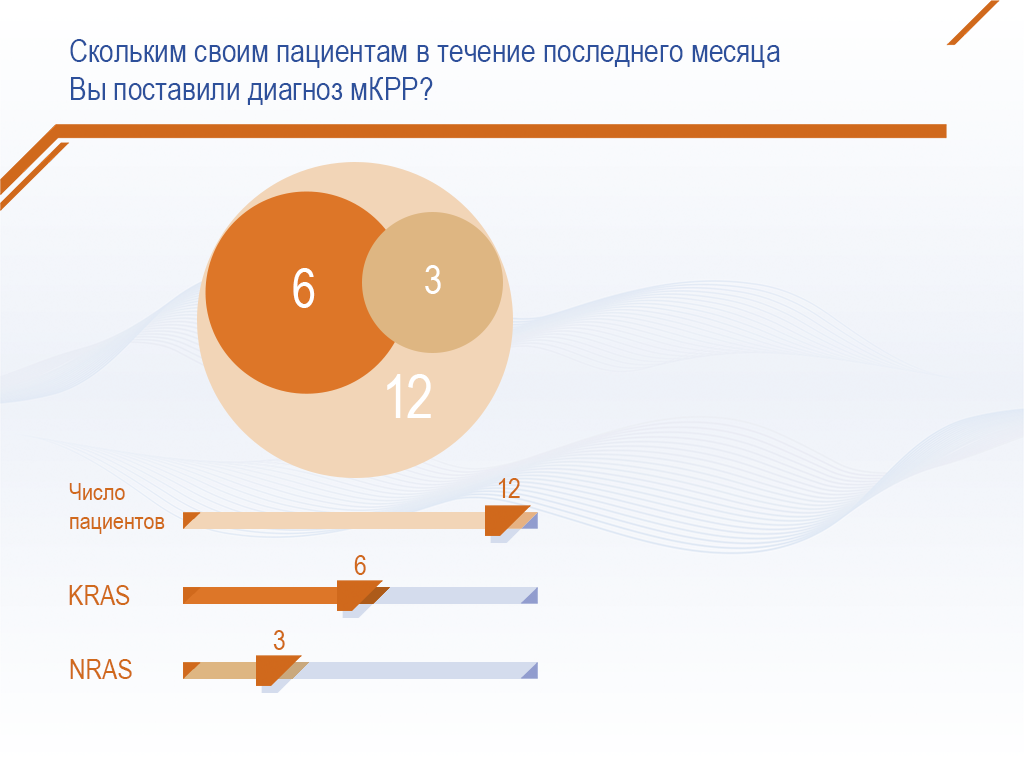
<style>
.page{position:relative;width:1024px;height:768px}
.page>*{position:absolute;margin:0}
.t1{font:32px "ArialNarrow";color:#2d509b}
.t2{font:53px "ArialNarrow";color:#ffffff}
.t3{font:40px "ArialNarrow";color:#ffffff}
.t4{font:60px "ArialNarrow";color:#ffffff}
.t5{font:24px "ArialNarrow";color:#d0691c}
.t6{font:28px "ArialNarrow";color:#d0691c}
</style>
<div class="page">
<p class="t1" style="left:70px;top:39px;width:710px;height:66px">Скольким своим пациентам в течение последнего месяца <br>Вы поставили диагноз мКРР?</p>
<p class="t2" style="left:293px;top:268px;width:22px;height:40px">6</p>
<p class="t3" style="left:425px;top:265px;width:16px;height:29px">3</p>
<p class="t4" style="left:387px;top:374px;width:44px;height:44px">12</p>
<p class="t5" style="left:69px;top:483px;width:96px;height:51px">Число <br>пациентов</p>
<p class="t6" style="left:498px;top:478px;width:22px;height:20px">12</p>
<p class="t6" style="left:354px;top:555px;width:12px;height:20px">6</p>
<p class="t6" style="left:69px;top:585px;width:61px;height:20px">KRAS</p>
<p class="t6" style="left:273px;top:630px;width:12px;height:20px">3</p>
<p class="t6" style="left:70px;top:659px;width:62px;height:20px">NRAS</p>
</div>
